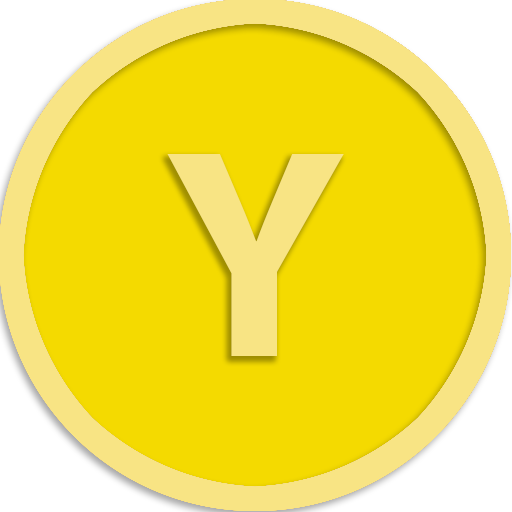
<style>
.page{position:relative;width:512px;height:512px;background:#f4da00}
.page>*{position:absolute;margin:0}
.t1{font:300px "MyriadPro-Bold";color:#f8e484}
</style>
<div class="page">
<p class="t1" style="left:167px;top:154px;width:177px;height:202px">Y</p>
</div>
